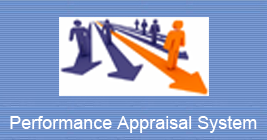
<style>
.page{position:relative;width:267px;height:140px}
.page>*{position:absolute;margin:0}
.t1{font:18px "ArialMT";color:#ffffff}
</style>
<div class="page">
<p class="t1" style="left:10px;top:116px;width:247px;height:17px">Performance Appraisal System</p>
</div>
